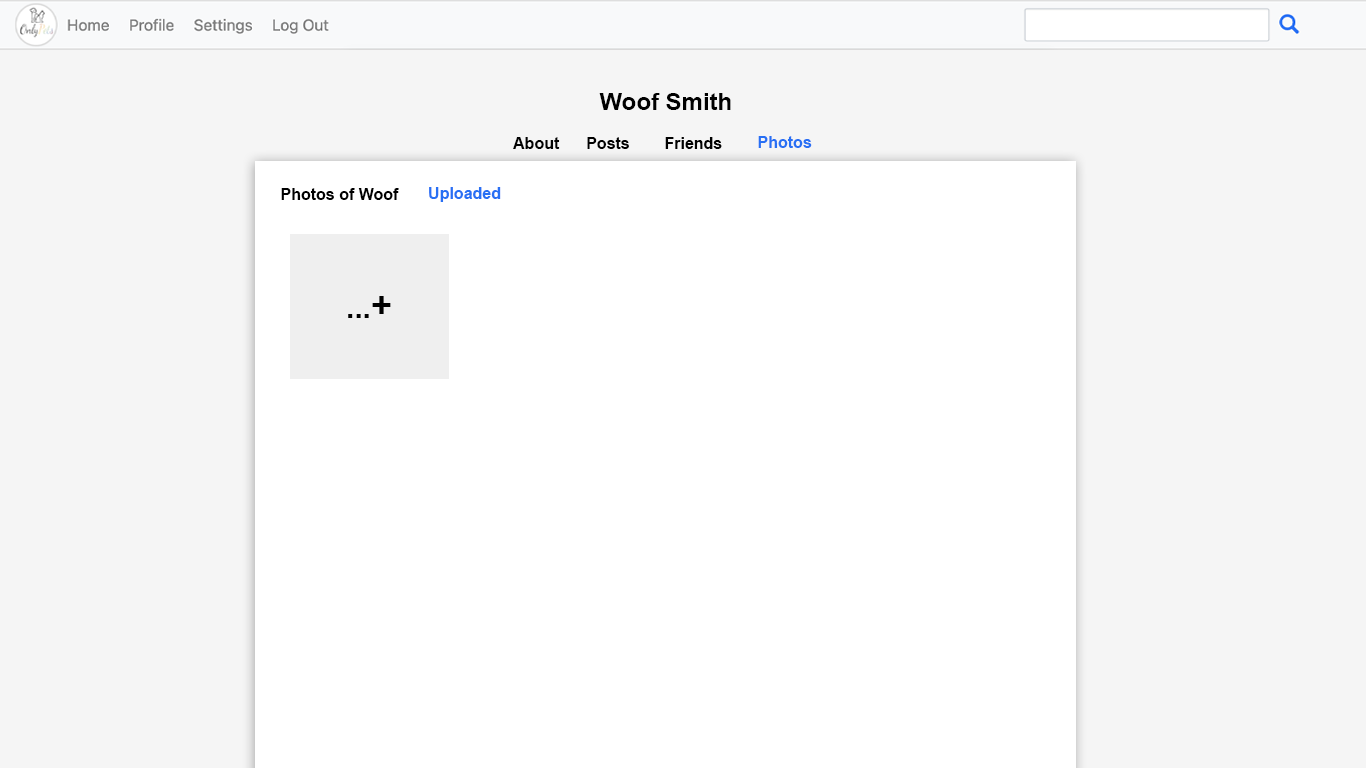
<style>
.page{position:relative;width:1366px;height:768px;background:#ffffff}
.page>*{position:absolute;margin:0}
.t1{font:24px "Arial-BoldMT";color:#000000}
.t2{font:16px "Arial-BoldMT";color:#020202}
.t3{font:16px "Arial-BoldMT";color:#000000}
.t4{font:16px "Arial-BoldMT";color:#010101}
.t5{font:16px "Arial-BoldMT";color:#2870f4}
.t6{font:30px "Arial-BoldMT";color:#010101}
.t7{font:36px "Arial-BoldMT";color:#010101}
</style>
<div class="page">
<p class="t1" style="left:599px;top:93px;width:132px;height:17px">Woof Smith</p>
<p class="t2" style="left:513px;top:137px;width:47px;height:12px">About</p>
<p class="t3" style="left:587px;top:137px;width:42px;height:12px">Posts</p>
<p class="t4" style="left:665px;top:137px;width:57px;height:12px">Friends</p>
<p class="t5" style="left:758px;top:136px;width:54px;height:12px">Photos</p>
<p class="t3" style="left:281px;top:188px;width:118px;height:12px">Photos of Woof</p>
<p class="t5" style="left:429px;top:187px;width:72px;height:15px">Uploaded</p>
<p class="t6" style="left:348px;top:296px;width:43px;height:22px">...<span class="t7">+</span></p>
</div>
